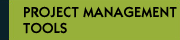
<style>
.page{position:relative;width:180px;height:40px;background:#97b03a}
.page>*{position:absolute;margin:0}
.t1{font:14.7px/16px "ItcKabel-Demi";letter-spacing:0.005em;color:#000000;text-transform:uppercase}
</style>
<div class="page">
<p class="t1" style="left:23px;top:6px;width:154px;height:28px">PROJECT Management<br>Tools</p>
</div>
